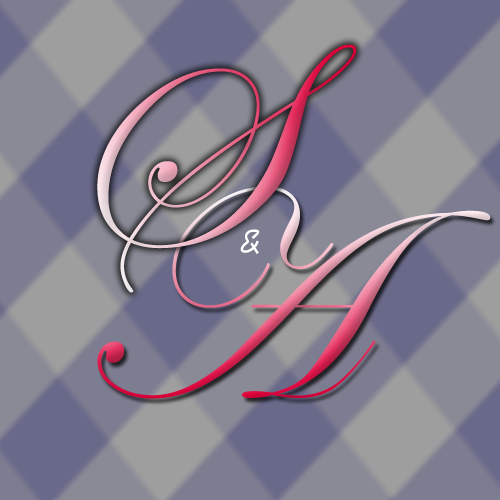
<style>
.page{position:relative;width:500px;height:500px}
.page>*{position:absolute;margin:0}
.t1{font:300px "EdwardianScriptITC"}
.t2{font:45.8px "DymaxionScript";color:#ffffff}
</style>
<div class="page">
<p class="t1" style="left:97px;top:44px;width:260px;height:249px">S</p>
<p class="t1" style="left:97px;top:186px;width:394px;height:213px">A</p>
<p class="t2" style="left:240px;top:229px;width:20px;height:25px">&amp;</p>
</div>
